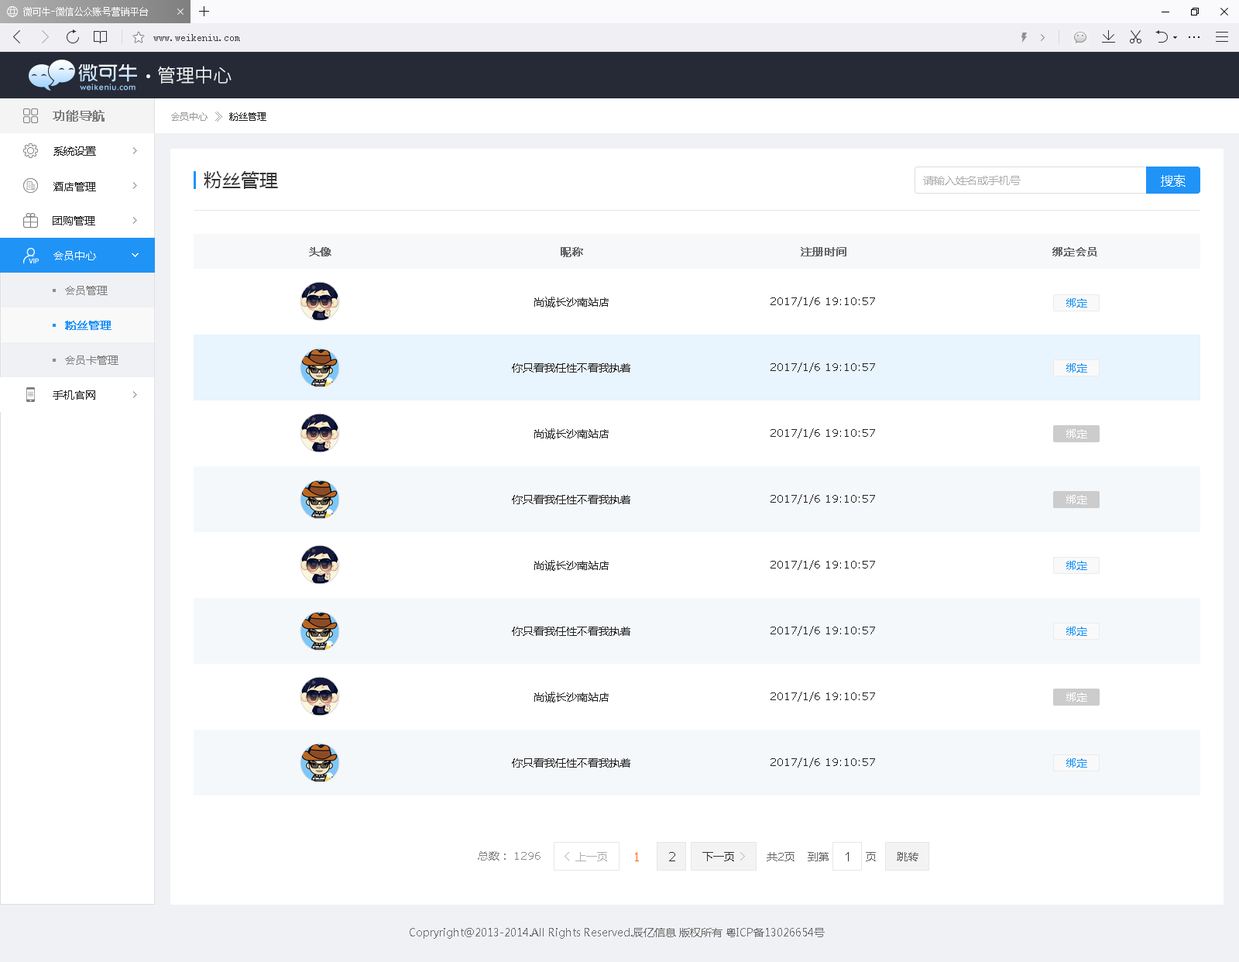
<style>
.page{position:relative;width:1239px;height:962px;background:#ffffff}
.page>*{position:absolute;margin:0}
.t1{font:18.6px "SourceHanSansCN-Light";color:#e1e1e1}
.t2{font:12.4px "MicrosoftYaHei";color:#7d7d7d;font-weight:bold}
.t3{font:9.3px "MicrosoftYaHei";color:#999999}
.t4{font:10.8px "SimSun";color:#999999}
.t5{font:9.3px "MicrosoftYaHei";color:#222222}
.t6{font:10.8px "MicrosoftYaHei";color:#222222}
.t7{font:18.6px "MicrosoftYaHei";color:#333333}
.t8{font:10.8px "MicrosoftYaHei";color:#afafaf}
.t9{font:12.4px "MicrosoftYaHei";color:#ffffff}
.t10{font:10.8px "MicrosoftYaHei";color:#ffffff}
.t11{font:10.8px "MicrosoftYaHei";color:#666666;font-weight:bold}
.t12{font:10.8px "MicrosoftYaHei";color:#7d7d7d}
.t13{font:10.8px "Verdana";color:#222222}
.t14{font:10.8px "MicrosoftYaHei";color:#2093f7}
.t15{font:10.8px "MicrosoftYaHei";color:#2093f7;font-weight:bold}
.t16{font:10.8px "MicrosoftYaHei";color:#6f6f6f}
</style>
<div class="page">
<p class="t1" style="left:158px;top:66px;width:74px;height:18px">管理中心</p>
<p class="t2" style="left:53px;top:110px;width:52px;height:12px">功能导航</p>
<p class="t3" style="left:171px;top:112px;width:37px;height:9px">会员中心</p>
<p class="t4" style="left:215px;top:112px;width:7px;height:10px">》</p>
<p class="t5" style="left:229px;top:112px;width:37px;height:9px">粉丝管理</p>
<p class="t6" style="left:53px;top:146px;width:43px;height:10px">系统设置</p>
<p class="t7" style="left:204px;top:171px;width:74px;height:18px">粉丝管理</p>
<p class="t6" style="left:53px;top:182px;width:43px;height:9px">酒店管理</p>
<p class="t8" style="left:923px;top:176px;width:98px;height:9px">请输入姓名或手机号</p>
<p class="t9" style="left:1161px;top:174px;width:25px;height:13px">搜索</p>
<p class="t6" style="left:53px;top:216px;width:42px;height:9px">团购管理</p>
<p class="t10" style="left:53px;top:251px;width:43px;height:9px">会员中心</p>
<p class="t11" style="left:309px;top:247px;width:23px;height:9px">头像</p>
<p class="t11" style="left:561px;top:247px;width:22px;height:10px">昵称</p>
<p class="t11" style="left:801px;top:247px;width:46px;height:9px">注册时间</p>
<p class="t11" style="left:1053px;top:247px;width:45px;height:9px">绑定会员</p>
<p class="t12" style="left:65px;top:286px;width:43px;height:9px">会员管理</p>
<p class="t6" style="left:534px;top:297px;width:75px;height:11px">尚诚长沙南站店</p>
<p class="t13" style="left:771px;top:297px;width:104px;height:10px">2017/1/6 19:10:57</p>
<p class="t14" style="left:1067px;top:298px;width:21px;height:10px">绑定</p>
<p class="t15" style="left:65px;top:321px;width:47px;height:9px">粉丝管理</p>
<p class="t12" style="left:65px;top:356px;width:54px;height:9px">会员卡管理</p>
<p class="t6" style="left:512px;top:363px;width:119px;height:10px">你只看我任性不看我执着</p>
<p class="t13" style="left:771px;top:363px;width:104px;height:10px">2017/1/6 19:10:57</p>
<p class="t14" style="left:1067px;top:363px;width:21px;height:10px">绑定</p>
<p class="t6" style="left:53px;top:390px;width:42px;height:10px">手机官网</p>
<p class="t10" style="left:1067px;top:429px;width:21px;height:9px">绑定</p>
<p class="t10" style="left:1067px;top:495px;width:21px;height:9px">绑定</p>
<p class="t14" style="left:1067px;top:561px;width:21px;height:9px">绑定</p>
<p class="t14" style="left:1067px;top:627px;width:21px;height:9px">绑定</p>
<p class="t10" style="left:1067px;top:693px;width:21px;height:9px">绑定</p>
<p class="t14" style="left:1067px;top:758px;width:21px;height:10px">绑定</p>
<p class="t16" style="left:410px;top:928px;width:415px;height:11px">Copryright@2013-2014.All Rights Reserved.辰亿信息 版权所有 粤ICP备13026654号</p>
</div>
